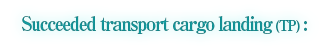
<style>
.page{position:relative;width:327px;height:48px;background:#ffffff}
.page>*{position:absolute;margin:0}
.t1{font:20px "RyuminPro-ExBold";letter-spacing:-0.08em;color:#129195;scale:0.9 1}
.t2{font:14px "RyuminPro-ExBold";letter-spacing:-0.08em;color:#129195;scale:0.9 1}
</style>
<div class="page">
<p class="t1" style="left:22px;top:16px;width:285px;height:18px">Succeeded transport cargo landing <span class="t2">(TP)</span> :</p>
</div>
